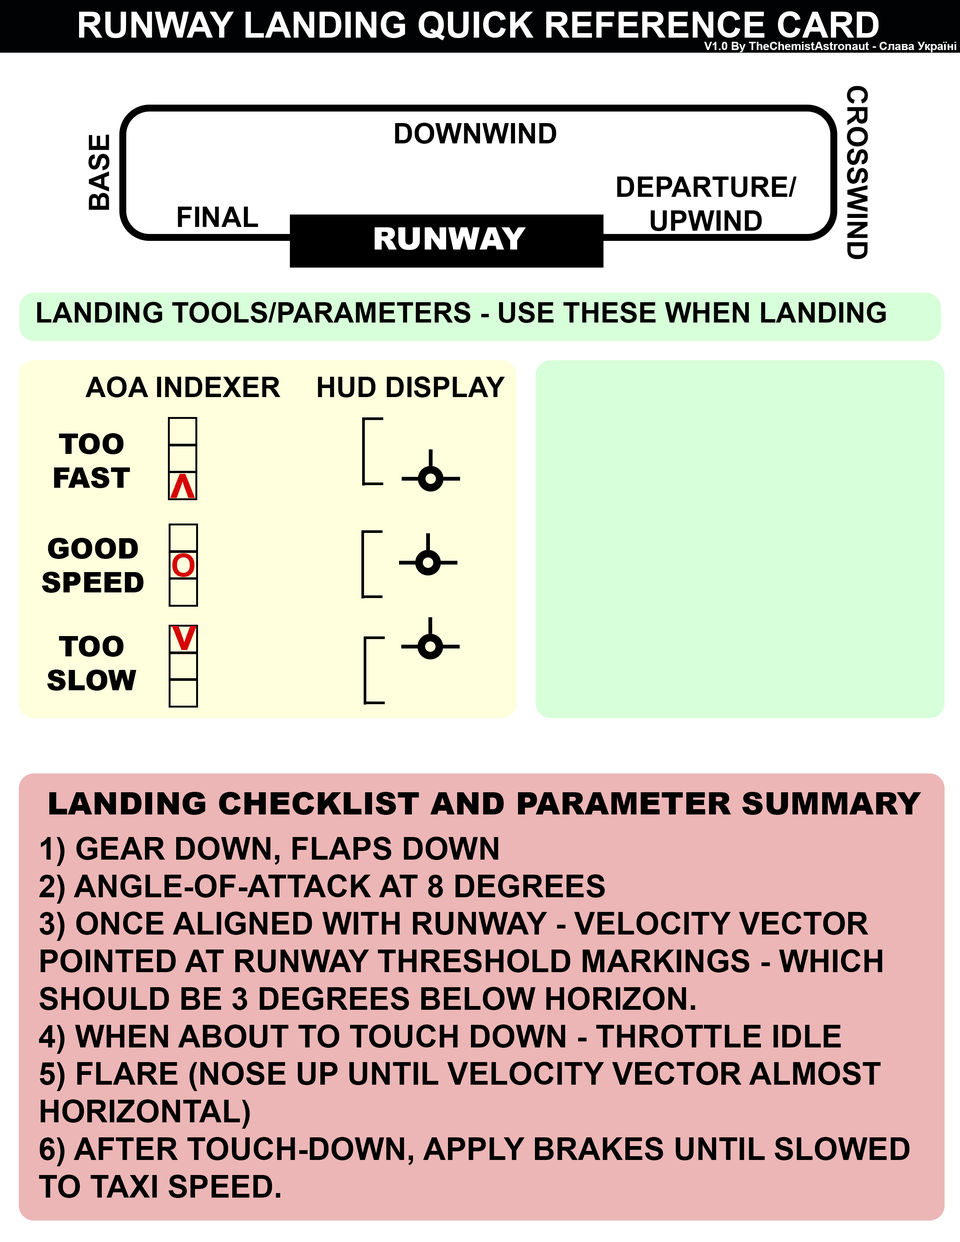
<style>
.page{position:relative;width:960px;height:1242px;background:#ffffff}
.page>*{position:absolute;margin:0}
.t1{font:36.1px "Arial-BoldMT";color:#ffffff}
.t2{font:11.5px "Arial-BoldMT";color:#ffffff}
.t3{font:28.2px "Arial-BoldMT";color:#000000}
.t4{font:31.4px "Arial-Black";color:#ffffff}
.t5{font:28.2px "Arial-Black";color:#000000}
.t6{font:46.1px "Arial-BoldMT";color:#d50606}
.t7{font:32px "Arial-BoldMT";color:#d50606}
.t8{font:31.4px "Arial-Black";color:#000000}
.t9{font:31.3px "Arial-BoldMT";color:#000000}
</style>
<div class="page">
<p class="t1" style="left:79px;top:11px;width:800px;height:29px">RUNWAY LANDING QUICK REFERENCE CARD</p>
<p class="t2" style="left:704px;top:42px;width:252px;height:10px">V1.0 By TheChemistAstronaut - Слава Україні</p>
<p class="t3" style="left:847px;top:86px;width:21px;height:173px;rotate:90deg">CROSSWIND</p>
<p class="t3" style="left:395px;top:123px;width:161px;height:21px">DOWNWIND</p>
<p class="t3" style="left:88px;top:134px;width:22px;height:76px;rotate:-90deg">BASE</p>
<p class="t3" style="left:617px;top:177px;width:180px;height:54px;text-align:center">DEPARTURE/<br>UPWIND</p>
<p class="t3" style="left:178px;top:207px;width:80px;height:20px">FINAL</p>
<p class="t4" style="left:375px;top:227px;width:151px;height:23px">RUNWAY</p>
<p class="t3" style="left:37px;top:302px;width:849px;height:21px">LANDING TOOLS/PARAMETERS - USE THESE WHEN LANDING</p>
<p class="t3" style="left:85px;top:376px;width:195px;height:22px">AOA INDEXER</p>
<p class="t3" style="left:318px;top:376px;width:187px;height:22px">HUD DISPLAY</p>
<p class="t5" style="left:54px;top:433px;width:76px;height:55px;text-align:center">TOO FAST</p>
<p class="t6" style="left:170px;top:474px;width:25px;height:24px;rotate:180deg">v</p>
<p class="t5" style="left:42px;top:538px;width:102px;height:55px;text-align:center">GOOD<br>SPEED</p>
<p class="t7" style="left:172px;top:553px;width:23px;height:24px">O</p>
<p class="t6" style="left:172px;top:626px;width:25px;height:24px">v</p>
<p class="t5" style="left:47px;top:636px;width:89px;height:55px;text-align:center">TOO<br>SLOW</p>
<p class="t8" style="left:49px;top:792px;width:872px;height:23px">LANDING CHECKLIST AND PARAMETER SUMMARY</p>
<p class="t9" style="left:39px;top:837px;width:870px;height:361px">1) GEAR DOWN, FLAPS DOWN<br>2) ANGLE-OF-ATTACK AT 8 DEGREES<br>3) ONCE ALIGNED WITH RUNWAY - VELOCITY VECTOR POINTED AT RUNWAY THRESHOLD MARKINGS - WHICH SHOULD BE 3 DEGREES BELOW HORIZON.<br>4) WHEN ABOUT TO TOUCH DOWN - THROTTLE IDLE<br>5) FLARE (NOSE UP UNTIL VELOCITY VECTOR ALMOST HORIZONTAL)<br>6) AFTER TOUCH-DOWN, APPLY BRAKES UNTIL SLOWED TO TAXI SPEED.</p>
</div>
